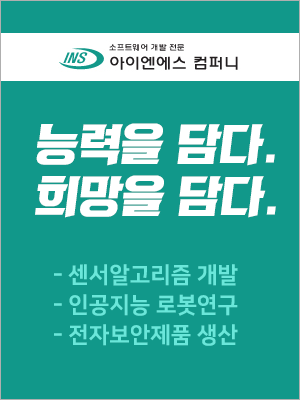
<style>
.page{position:relative;width:300px;height:400px;background:#11988a}
.page>*{position:absolute;margin:0}
.t1{font:43.4px "KoreanRKT-R";color:#ffffff}
.t2{font:22.5px/30px "NanumSquareEB";color:#6ae7da}
</style>
<div class="page">
<p class="t1" style="left:35px;top:123px;width:241px;height:95px">능력을 담다.<br>희망을 담다.</p>
<p class="t2" style="left:54px;top:264px;width:184px;height:82px">- 센서알고리즘 개발<br>- 인공지능 로봇연구<br>- 전자보안제품 생산</p>
</div>
